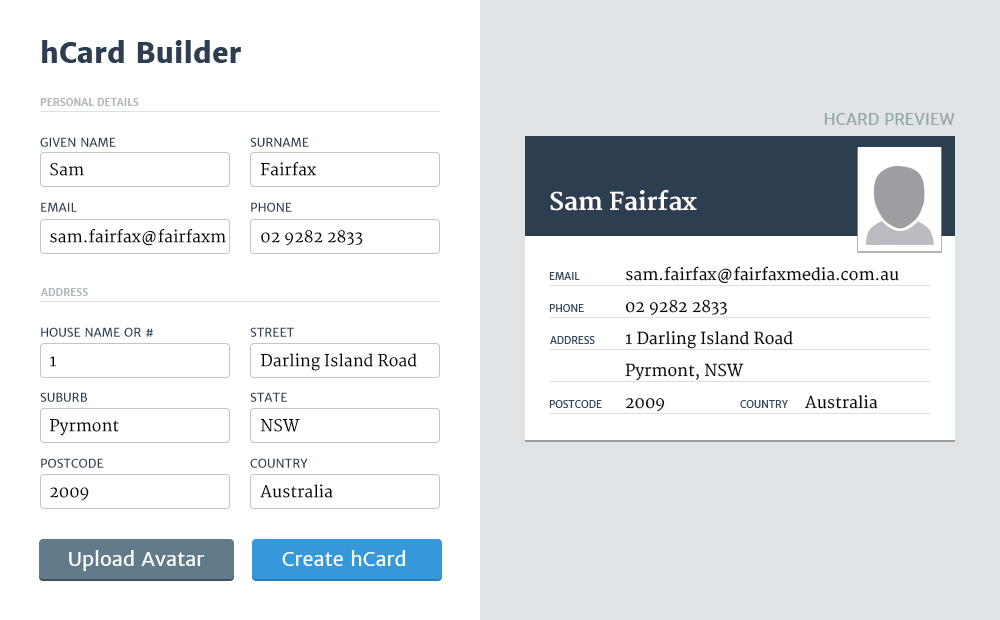
<style>
.page{position:relative;width:1000px;height:620px;background:#ffffff}
.page>*{position:absolute;margin:0}
.t1{font:28px "MerriweatherSans-ExtraBold";color:#2c3e50}
.t2{font:10px "MerriweatherSans-Bold";color:#b0b8bc;text-transform:uppercase}
.t3{font:16px "MerriweatherSans-Regular";color:#95a5a6;text-transform:uppercase}
.t4{font:12px "MerriweatherSans-Regular";color:#2c3e50;text-transform:uppercase}
.t5{font:16px "Merriweather";color:#000000}
.t6{font:16px "Merriweather";color:#000000;text-transform:uppercase}
.t7{font:24px "Merriweather-Bold";color:#ffffff}
.t8{font:16px/32px "Merriweather";color:#000000}
.t9{font:10px "MerriweatherSans-Regular";color:#34495e;text-transform:uppercase}
</style>
<div class="page">
<p class="t1" style="left:42px;top:40px;width:199px;height:23px">hCard Builder</p>
<p class="t2" style="left:40px;top:98px;width:99px;height:8px">Personal Details</p>
<p class="t3" style="left:824px;top:113px;width:131px;height:12px">hcard Preview</p>
<p class="t4" style="left:40px;top:137px;width:76px;height:10px">Given Name</p>
<p class="t4" style="left:250px;top:137px;width:59px;height:10px">Surname</p>
<p class="t5" style="left:50px;top:163px;width:34px;height:13px"><span class="t6">S</span>am</p>
<p class="t5" style="left:261px;top:162px;width:55px;height:14px"><span class="t6">F</span>airfax</p>
<p class="t7" style="left:550px;top:190px;width:147px;height:21px">Sam Fairfax</p>
<p class="t4" style="left:41px;top:202px;width:36px;height:10px">Email</p>
<p class="t4" style="left:251px;top:202px;width:41px;height:10px">Phone</p>
<p class="t5" style="left:50px;top:229px;width:176px;height:17px">sam.fairfax@fairfaxm</p>
<p class="t6" style="left:261px;top:230px;width:102px;height:16px">02 9282 2833</p>
<p class="t8" style="left:625px;top:266px;width:274px;height:146px">sam.fairfax@fairfaxmedia.com.au<br>02 9282 2833<br>1 Darling Island Road <br>Pyrmont, NSW <br>2009    Australia</p>
<p class="t9" style="left:549px;top:272px;width:31px;height:8px">Email</p>
<p class="t2" style="left:40px;top:288px;width:48px;height:8px">Address</p>
<p class="t9" style="left:549px;top:304px;width:35px;height:8px">Phone</p>
<p class="t4" style="left:41px;top:327px;width:112px;height:10px">House Name or #</p>
<p class="t4" style="left:250px;top:327px;width:44px;height:10px">STREET</p>
<p class="t9" style="left:550px;top:336px;width:45px;height:8px">Address</p>
<p class="t5" style="left:261px;top:353px;width:156px;height:18px">Darling Island Road</p>
<p class="t5" style="left:50px;top:356px;width:6px;height:11px">1</p>
<p class="t4" style="left:40px;top:392px;width:47px;height:10px">SUBURB</p>
<p class="t4" style="left:250px;top:392px;width:37px;height:10px">STATE</p>
<p class="t9" style="left:549px;top:400px;width:53px;height:8px">Postcode</p>
<p class="t9" style="left:740px;top:400px;width:48px;height:8px">Country</p>
<p class="t5" style="left:50px;top:419px;width:69px;height:17px">Pyrmont</p>
<p class="t5" style="left:261px;top:419px;width:39px;height:13px">NSW</p>
<p class="t4" style="left:41px;top:458px;width:63px;height:10px">Postcode</p>
<p class="t4" style="left:250px;top:458px;width:58px;height:10px">Country</p>
<p class="t5" style="left:260px;top:484px;width:73px;height:14px">Australia</p>
<p class="t5" style="left:50px;top:487px;width:39px;height:14px">2009</p>
</div>
